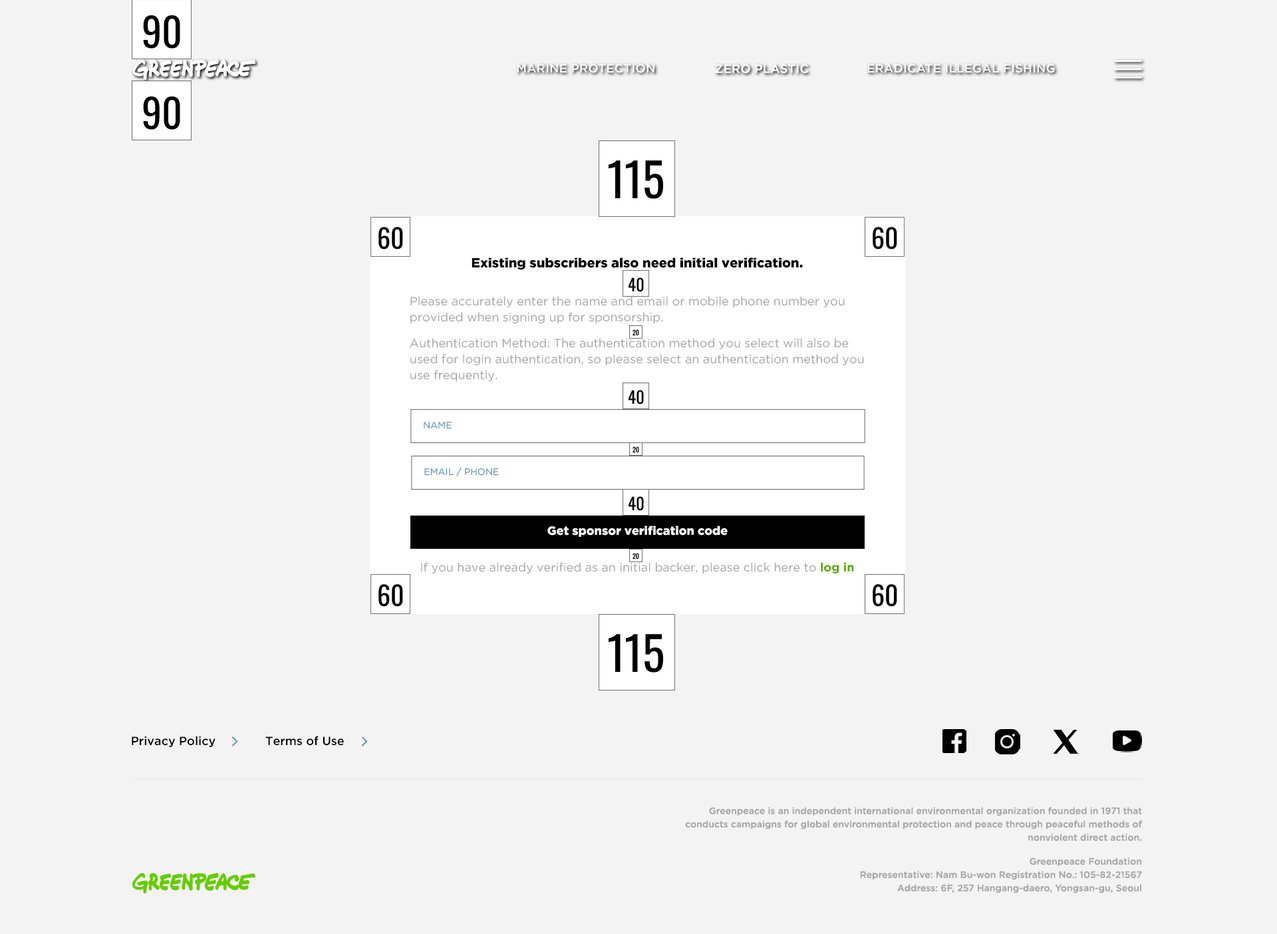
<style>
.page{position:relative;width:1277px;height:934px;background:#f3f3f3}
.page>*{position:absolute;margin:0}
.t1{font:12px "GothamPro-Medium";color:#ffffff;text-transform:uppercase}
.t2{font:13.3px "GothamPro-Black";color:#000000}
.t3{font:12px/16px "GothamPro";color:#a6a6a6}
.t4{font:9.3px "GothamPro";color:#5591af}
.t5{font:12px "GothamPro-Black";color:#ffffff}
.t6{font:12px "GothamPro";color:#a6a6a6}
.t7{font:12px "GothamPro-Bold";color:#55ab00}
.t8{font:12px "GothamPro-Medium";color:#000000}
.t9{font:9.3px/13.3px "GothamPro-Medium";color:#a6a6a6}
</style>
<div class="page">
<p class="t1" style="left:517px;top:64px;width:137px;height:9px">Marine protection</p>
<p class="t1" style="left:715px;top:64px;width:94px;height:9px">Zero plastic</p>
<p class="t1" style="left:867px;top:64px;width:188px;height:9px">Eradicate illegal fishing</p>
<p class="t2" style="left:472px;top:257px;width:331px;height:13px">Existing subscribers also need initial verification.</p>
<p class="t3" style="left:410px;top:296px;width:435px;height:28px">Please accurately enter the name and email or mobile phone number you provided when signing up for sponsorship.</p>
<p class="t3" style="left:410px;top:338px;width:454px;height:44px">Authentication Method: The authentication method you select will also be used for login authentication, so please select an authentication method you use frequently.</p>
<p class="t4" style="left:424px;top:422px;width:28px;height:7px">NAME</p>
<p class="t4" style="left:424px;top:467px;width:75px;height:9px">EMAIL / PHONE</p>
<p class="t5" style="left:547px;top:525px;width:181px;height:12px">Get sponsor verification code</p>
<p class="t6" style="left:421px;top:562px;width:433px;height:12px">If you have already verified as an initial backer, please click here to <span class="t7">log in</span></p>
<p class="t8" style="left:132px;top:736px;width:83px;height:11px">Privacy Policy</p>
<p class="t8" style="left:265px;top:736px;width:79px;height:10px">Terms of Use</p>
<p class="t9" style="left:685px;top:807px;width:457px;height:34px;text-align:right">Greenpeace is an independent international environmental organization founded in 1971 that conducts campaigns for global environmental protection and peace through peaceful methods of nonviolent direct action.</p>
<p class="t9" style="left:860px;top:857px;width:282px;height:36px;text-align:right">Greenpeace Foundation<br>Representative: Nam Bu-won Registration No.: 105-82-21567<br>Address: 6F, 257 Hangang-daero, Yongsan-gu, Seoul</p>
</div>
